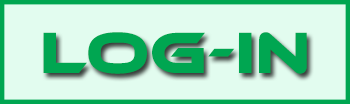
<style>
.page{position:relative;width:350px;height:104px;background:#e2fcef}
.page>*{position:absolute;margin:0}
.t1{font:60px "EthnocentricRg-Regular";color:#00a651}
</style>
<div class="page">
<p class="t1" style="left:43px;top:32px;width:264px;height:42px">log-IN</p>
</div>
